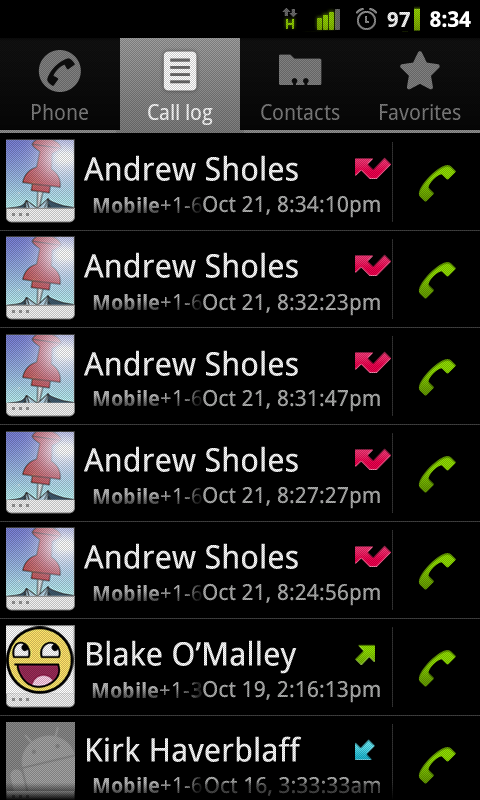
<style>
.page{position:relative;width:480px;height:800px;background:#000000}
.page>*{position:absolute;margin:0}
.t1{font:21.5px "DroidSans-Bold";color:#ffffff}
.t2{font:32.3px "DroidSans"}
.t3{font:21.9px "DroidSans"}
</style>
<div class="page">
<p class="t1" style="left:430px;top:11px;width:41px;height:17px">8:34</p>
<p class="t2" style="left:84px;top:155px;width:214px;height:26px">Andrew Sholes</p>
<p class="t3" style="left:203px;top:195px;width:177px;height:23px">Oct 21, 8:34:10pm</p>
<p class="t2" style="left:84px;top:252px;width:214px;height:26px">Andrew Sholes</p>
<p class="t3" style="left:203px;top:293px;width:177px;height:23px">Oct 21, 8:32:23pm</p>
<p class="t2" style="left:84px;top:350px;width:214px;height:26px">Andrew Sholes</p>
<p class="t3" style="left:203px;top:389px;width:177px;height:23px">Oct 21, 8:31:47pm</p>
<p class="t2" style="left:84px;top:446px;width:214px;height:26px">Andrew Sholes</p>
<p class="t3" style="left:203px;top:486px;width:177px;height:23px">Oct 21, 8:27:27pm</p>
<p class="t2" style="left:84px;top:543px;width:214px;height:26px">Andrew Sholes</p>
<p class="t3" style="left:203px;top:583px;width:177px;height:23px">Oct 21, 8:24:56pm</p>
<p class="t2" style="left:87px;top:640px;width:210px;height:34px">Blake O’Malley</p>
<p class="t3" style="left:203px;top:680px;width:177px;height:23px">Oct 19, 2:16:13pm</p>
<p class="t2" style="left:87px;top:736px;width:215px;height:26px">Kirk Haverblaff</p>
</div>
